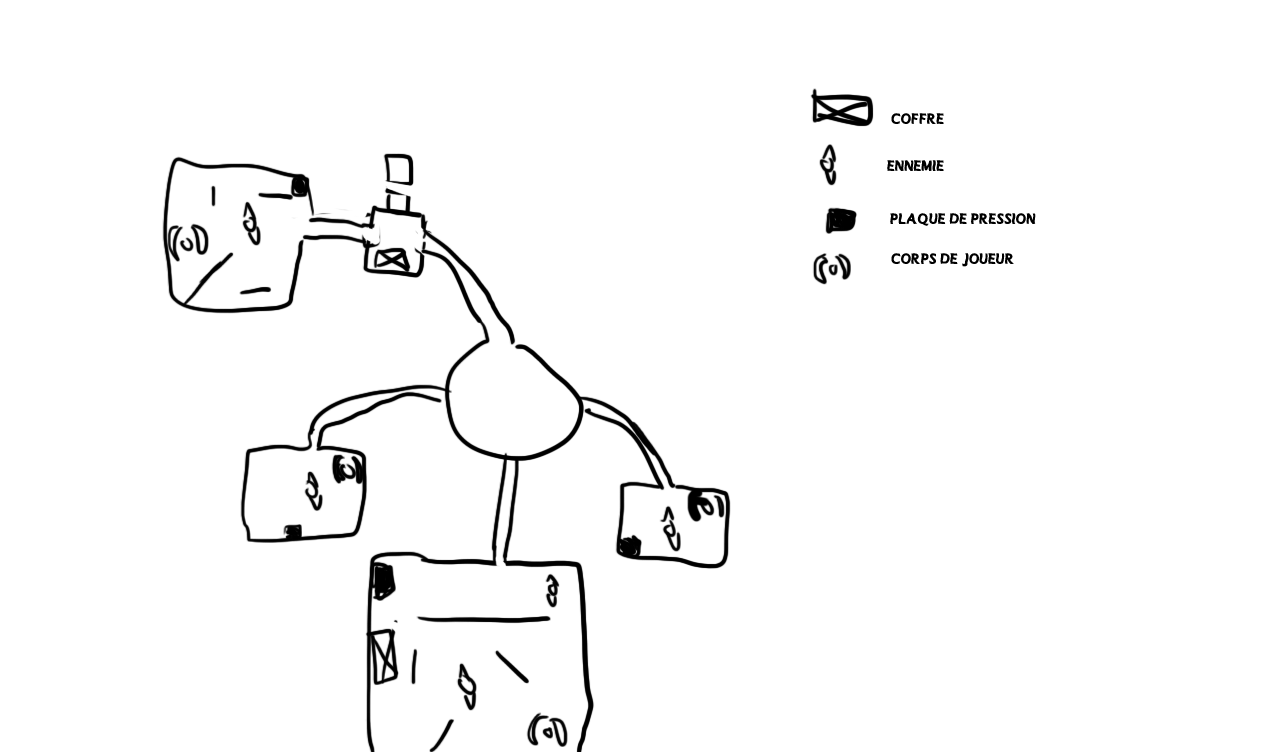
<style>
.page{position:relative;width:1286px;height:752px;background:#ffffff}
.page>*{position:absolute;margin:0}
.t1{font:15.4px "MANOLETE";color:#000000}
</style>
<div class="page">
<p class="t1" style="left:891px;top:113px;width:53px;height:11px">coffre</p>
<p class="t1" style="left:887px;top:160px;width:57px;height:11px">ennemie</p>
<p class="t1" style="left:890px;top:213px;width:146px;height:13px">plaque de pression</p>
<p class="t1" style="left:891px;top:253px;width:123px;height:14px">corps de joueur</p>
</div>
